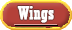
<style>
.page{position:relative;width:72px;height:30px}
.page>*{position:absolute;margin:0}
.t1{font:18px "Rockwell-Condensed";color:#ffffff;font-weight:bold}
</style>
<div class="page">
<p class="t1" style="left:17px;top:6px;width:37px;height:17px">Wings</p>
</div>
